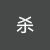
<style>
.page{position:relative;width:50px;height:50px;background:#474949}
.page>*{position:absolute;margin:0}
.t1{font:18px "MicrosoftYaHei";color:#ffffff}
</style>
<div class="page">
<p class="t1" style="left:16px;top:16px;width:18px;height:18px">杀</p>
</div>
